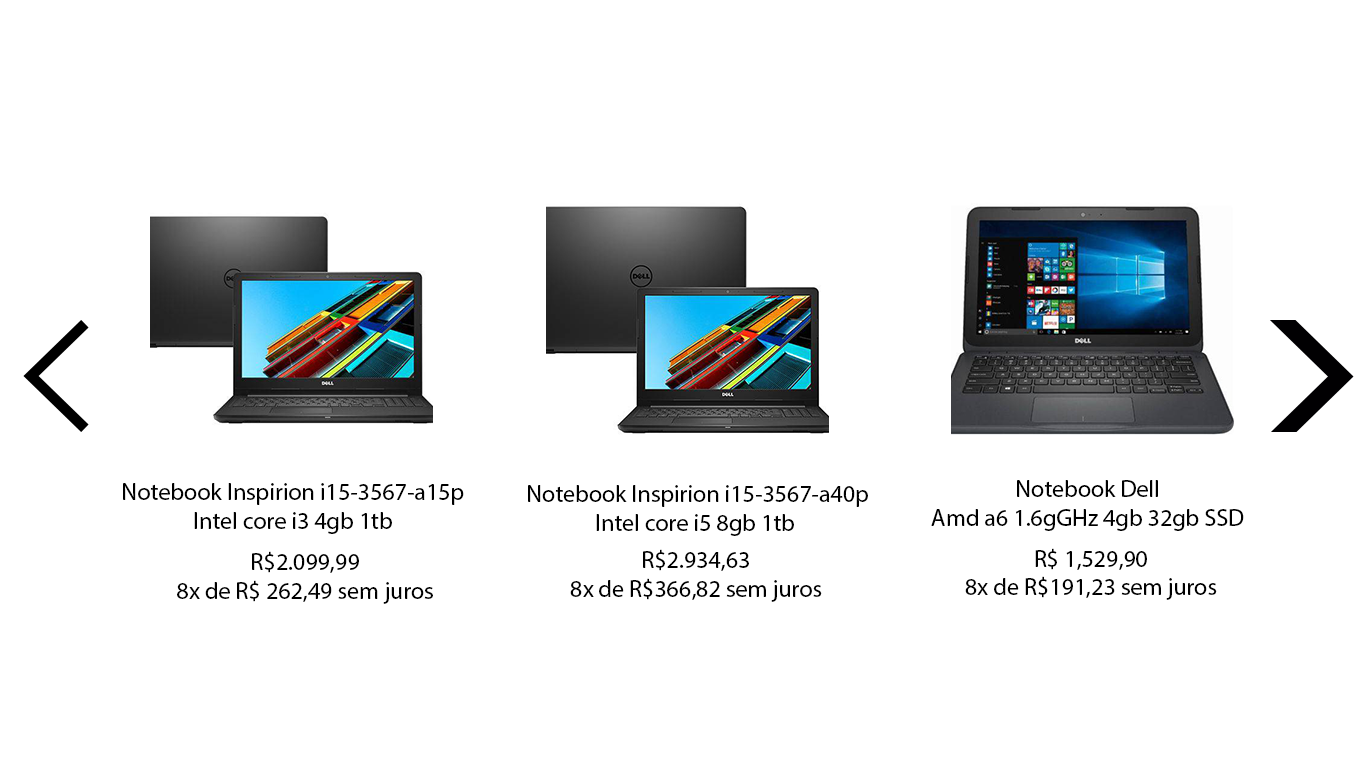
<style>
.page{position:relative;width:1366px;height:768px;background:#ffffff}
.page>*{position:absolute;margin:0}
.t1{font:24px "MyriadPro-Regular";color:#000000}
</style>
<div class="page">
<p class="t1" style="left:123px;top:483px;width:341px;height:51px;text-align:center">Notebook Inspirion i15-3567-a15p<br>Intel core i3 4gb 1tb</p>
<p class="t1" style="left:528px;top:485px;width:340px;height:51px;text-align:center">Notebook Inspirion i15-3567-a40p<br>Intel core i5 8gb 1tb</p>
<p class="t1" style="left:931px;top:480px;width:313px;height:51px;text-align:center">Notebook Dell<br>Amd a6 1.6gGHz 4gb 32gb SSD</p>
<p class="t1" style="left:177px;top:551px;width:256px;height:53px;text-align:center">R$2.099,99<br>8x de R$ 262,49 sem juros</p>
<p class="t1" style="left:570px;top:549px;width:252px;height:53px;text-align:center">R$2.934,63<br>8x de R$366,82 sem juros</p>
<p class="t1" style="left:965px;top:548px;width:252px;height:52px;text-align:center">R$ 1,529,90<br>8x de R$191,23 sem juros</p>
</div>
